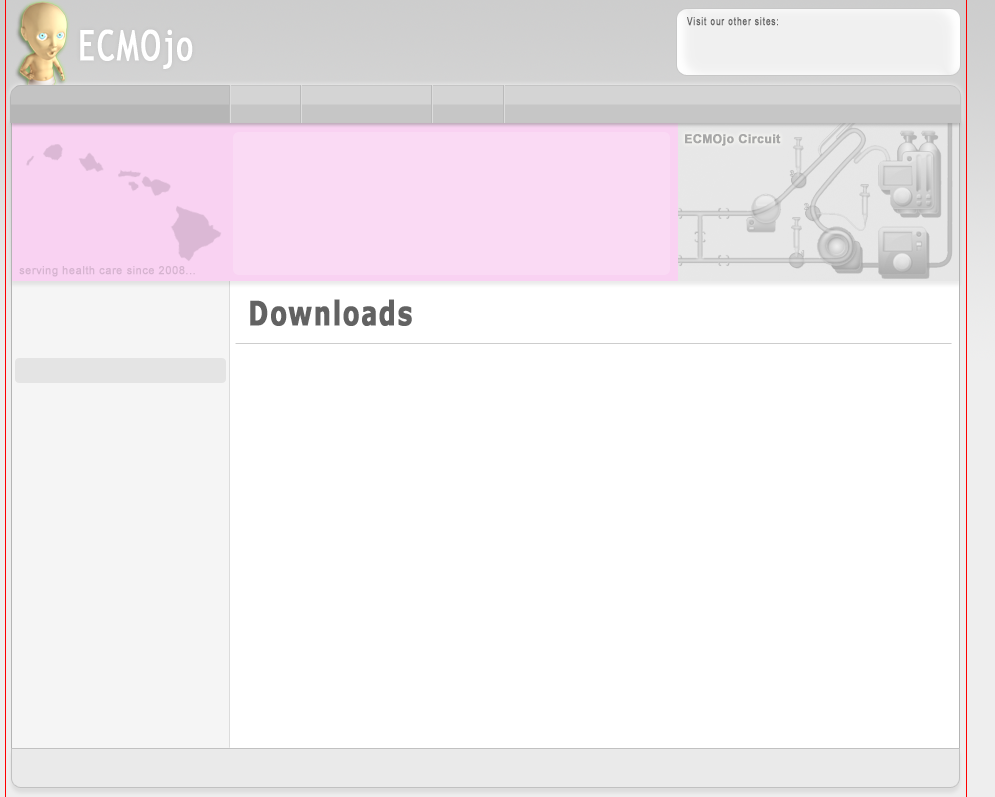
<style>
.page{position:relative;width:995px;height:797px;background:#ffffff}
.page>*{position:absolute;margin:0}
.t1{font:11.2px "ArialMT";letter-spacing:0.1em;color:#666666;font-weight:bold;scale:0.71 1}
.t2{font:42px "TrebuchetMS";letter-spacing:0.05em;color:#ffffff;font-weight:bold;scale:0.71 1}
.t3{font:12px "Arial-BoldMT";letter-spacing:0.025em;color:#a7a7a7;font-weight:bold}
.t4{font:11px "ArialMT";letter-spacing:0.025em;color:#d6b4d0;font-weight:bold}
</style>
<div class="page">
<p class="t1" style="left:687px;top:17px;width:91px;height:9px">Visit our other sites:</p>
<p class="t2" style="left:80px;top:29px;width:113px;height:40px">ECMOjo</p>
<p class="t3" style="left:685px;top:134px;width:96px;height:12px">ECMOjo Circuit</p>
<p class="t4" style="left:19px;top:266px;width:176px;height:11px">serving health care since 2008...</p>
</div>
